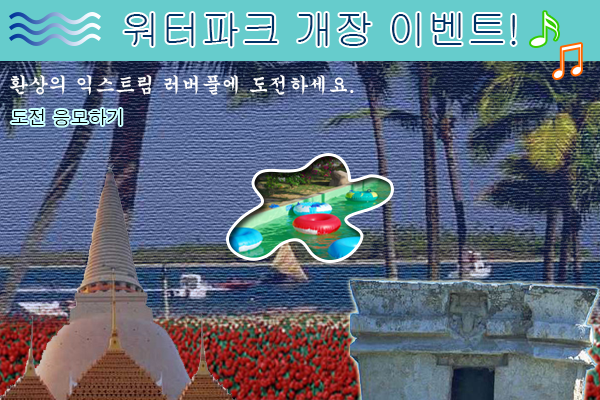
<style>
.page{position:relative;width:600px;height:400px}
.page>*{position:absolute;margin:0}
.t1{font:40px "Gulim";color:#003366}
.t2{font:20px "Gungsuh";color:#ffffff}
.t3{font:18px "Dotum";color:#000000}
</style>
<div class="page">
<p class="t1" style="left:124px;top:13px;width:392px;height:34px">워터파크 개장 이벤트!</p>
<p class="t2" style="left:10px;top:75px;width:344px;height:20px">환상의 익스트림 러버풀에 도전하세요.</p>
<p class="t3" style="left:11px;top:109px;width:111px;height:17px">도전 응모하기</p>
</div>
